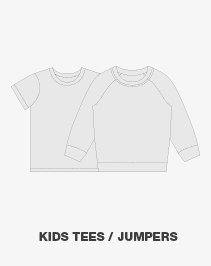
<style>
.page{position:relative;width:211px;height:266px;background:#f6f6f6}
.page>*{position:absolute;margin:0}
.t1{font:12px "HelveticaNeueLTStd-Hv";color:#3d3d3d}
</style>
<div class="page">
<p class="t1" style="left:39px;top:232px;width:139px;height:9px">KIDS TEES / JUMPERS</p>
</div>
